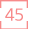
<style>
.page{position:relative;width:29px;height:30px;background:#ffffff}
.page>*{position:absolute;margin:0}
.t1{font:16px "HancomGothicRegular";color:#f78a8a}
</style>
<div class="page">
<p class="t1" style="left:5px;top:8px;width:18px;height:13px">45</p>
</div>
